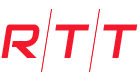
<style>
.page{position:relative;width:140px;height:84px;background:#ffffff}
.page>*{position:absolute;margin:0}
.t1{font:48.6px "Audiowide-Regular";letter-spacing:0.26em;color:#f3182c}
</style>
<div class="page">
<p class="t1" style="left:1px;top:24px;width:137px;height:34px">RTT</p>
</div>
